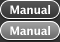
<style>
.page{position:relative;width:60px;height:42px}
.page>*{position:absolute;margin:0}
.t1{font:11.5px "LucidaGrande-Bold";letter-spacing:-0.025em;color:#ffffff}
</style>
<div class="page">
<p class="t1" style="left:10px;top:5px;width:40px;height:9px">Manual</p>
<p class="t1" style="left:10px;top:26px;width:40px;height:9px">Manual</p>
</div>
